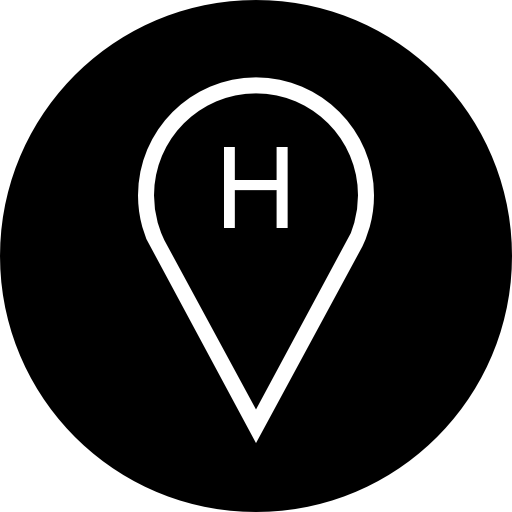
<style>
.page{position:relative;width:512px;height:512px;background:#000000}
.page>*{position:absolute;margin:0}
.t1{font:112.5px "ArialMT";color:#ffffff}
</style>
<div class="page">
<p class="t1" style="left:224px;top:147px;width:64px;height:81px">H</p>
</div>
